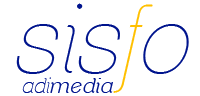
<style>
.page{position:relative;width:200px;height:96px;background:#ffffff}
.page>*{position:absolute;margin:0}
.t1{font:94.3px "ClementePDab-HairlineItalic";letter-spacing:0.045em;color:#00148d}
.t2{font:94.3px "ClementePDab-HairlineItalic";letter-spacing:0.045em;color:#ffc000}
.t3{font:21.3px "ClementePDaf-LightItalic";letter-spacing:0.045em;color:#00148d}
.t4{font:21.3px "ClementePDab-HairlineItalic";letter-spacing:0.045em;color:#00148d}
</style>
<div class="page">
<p class="t1" style="left:16px;top:3px;width:173px;height:90px">sis<span class="t2">f</span>o</p>
<p class="t3" style="left:22px;top:77px;width:91px;height:16px"><span class="t4">adi</span>media</p>
</div>
